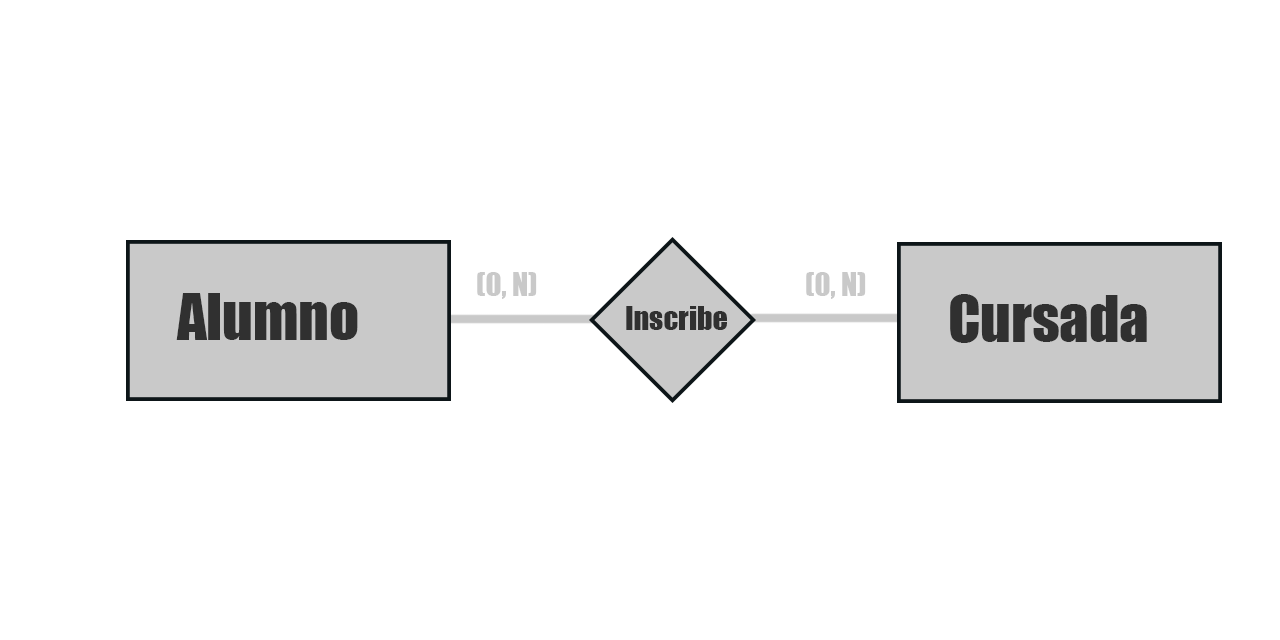
<style>
.page{position:relative;width:1280px;height:640px;background:#ffffff}
.page>*{position:absolute;margin:0}
.t1{font:30px "Impact";color:#c9c9c9}
.t2{font:58.5px "Impact";color:#303030}
.t3{font:30px "Impact";color:#303030}
</style>
<div class="page">
<p class="t1" style="left:477px;top:272px;width:60px;height:27px">(0, N)</p>
<p class="t1" style="left:806px;top:272px;width:60px;height:27px">(0, N)</p>
<p class="t2" style="left:176px;top:293px;width:182px;height:47px">Alumno</p>
<p class="t2" style="left:950px;top:294px;width:197px;height:49px">Cursada</p>
<p class="t3" style="left:626px;top:306px;width:101px;height:24px">Inscribe</p>
</div>
